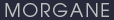
<style>
.page{position:relative;width:114px;height:20px;background:#282a3c}
.page>*{position:absolute;margin:0}
.t1{font:18px "AvantGarde-Book";letter-spacing:0.1em;color:#bfbfbf}
</style>
<div class="page">
<p class="t1" style="left:5px;top:3px;width:104px;height:14px">MORGANE</p>
</div>
